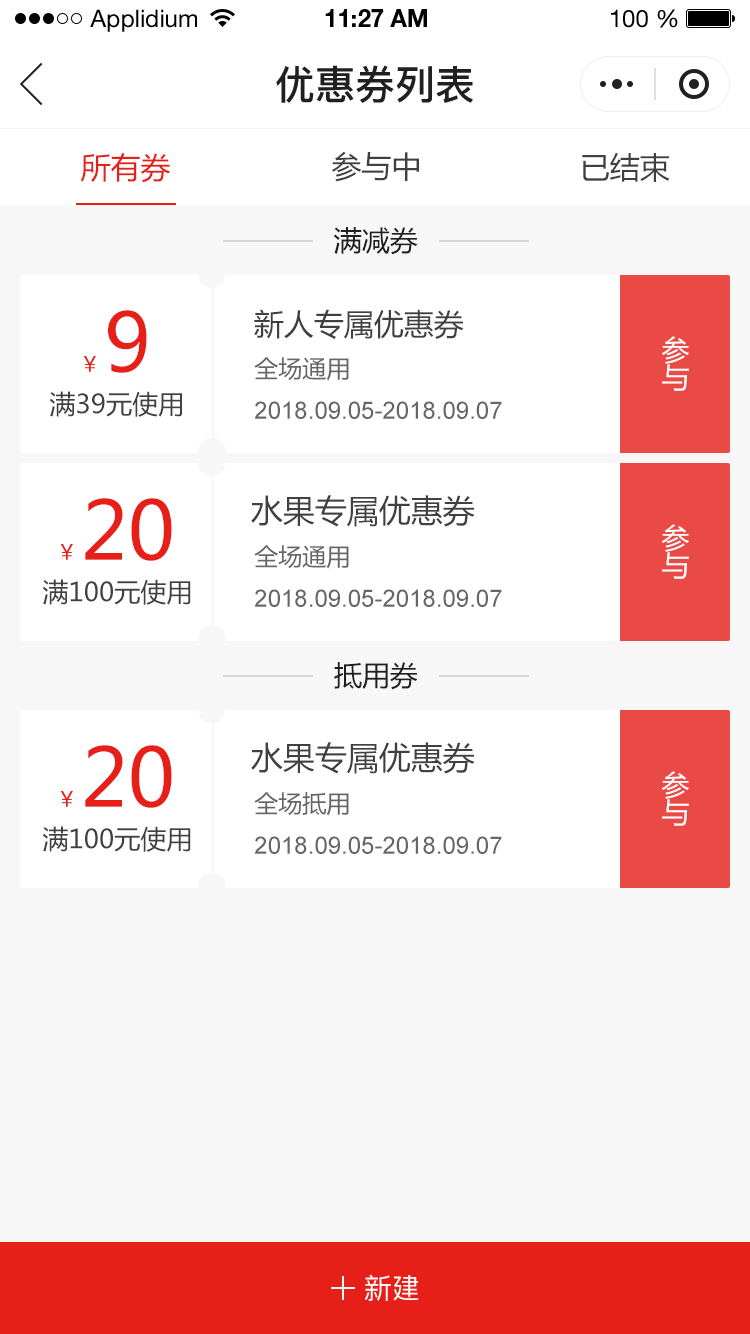
<style>
.page{position:relative;width:750px;height:1334px;background:#ffffff}
.page>*{position:absolute;margin:0}
.t1{font:24px "HelveticaNeueLTStd-Roman";color:#000000}
.t2{font:24px "HelveticaNeueLTStd-Bd";color:#000000}
.t3{font:40px "PingFang-SC-Bold";color:#202020;text-transform:uppercase}
.t4{font:30px "MicrosoftYaHei";color:#e61f18;text-transform:uppercase}
.t5{font:30px "MicrosoftYaHei";color:#404040;text-transform:uppercase}
.t6{font:28px "MicrosoftYaHei";color:#202020;text-transform:uppercase}
.t7{font:80px "MicrosoftYaHei";color:#e61f18;text-transform:uppercase}
.t8{font:28px "MicrosoftYaHei";color:#fffeff;text-transform:uppercase}
.t9{font:22px "PingFang-SC-Medium";color:#e61f18;text-transform:uppercase}
.t10{font:24px "MicrosoftYaHei";color:#666666;text-transform:uppercase}
.t11{font:26px "MicrosoftYaHei";color:#404040;text-transform:uppercase}
.t12{font:24px "ArialMT";color:#666666;text-transform:uppercase}
.t13{font:32px "MicrosoftYaHei";color:#404040;text-transform:uppercase}
.t14{font:28px "PingFang-SC-Medium";color:#ffffff;text-transform:uppercase}
</style>
<div class="page">
<p class="t1" style="left:90px;top:9px;width:107px;height:23px">Applidium</p>
<p class="t2" style="left:325px;top:9px;width:102px;height:18px">11:27 AM</p>
<p class="t1" style="left:611px;top:9px;width:67px;height:19px">100 %</p>
<p class="t3" style="left:276px;top:65px;width:197px;height:38px">优惠券列表</p>
<p class="t4" style="left:80px;top:153px;width:90px;height:30px">所有券</p>
<p class="t5" style="left:331px;top:151px;width:88px;height:31px">参与中</p>
<p class="t5" style="left:582px;top:152px;width:88px;height:30px">已结束</p>
<p class="t6" style="left:333px;top:227px;width:85px;height:28px">满减券</p>
<p class="t7" style="left:108px;top:310px;width:39px;height:63px">9</p>
<p class="t5" style="left:254px;top:309px;width:210px;height:30px">新人专属优惠券</p>
<p class="t8" style="left:661px;top:336px;width:28px;height:55px">参与</p>
<p class="t9" style="left:83px;top:356px;width:13px;height:16px">¥</p>
<p class="t10" style="left:254px;top:357px;width:95px;height:24px">全场通用</p>
<p class="t11" style="left:49px;top:391px;width:133px;height:26px">满39元使用</p>
<p class="t12" style="left:255px;top:401px;width:247px;height:18px">2018.09.05-2018.09.07</p>
<p class="t13" style="left:251px;top:495px;width:224px;height:32px">水果专属优惠券</p>
<p class="t7" style="left:85px;top:498px;width:87px;height:63px">20</p>
<p class="t8" style="left:661px;top:524px;width:28px;height:55px">参与</p>
<p class="t9" style="left:60px;top:544px;width:13px;height:16px">¥</p>
<p class="t10" style="left:254px;top:545px;width:95px;height:24px">全场通用</p>
<p class="t11" style="left:42px;top:579px;width:149px;height:26px">满100元使用</p>
<p class="t12" style="left:255px;top:589px;width:247px;height:18px">2018.09.05-2018.09.07</p>
<p class="t6" style="left:334px;top:662px;width:84px;height:28px">抵用券</p>
<p class="t7" style="left:85px;top:745px;width:87px;height:63px">20</p>
<p class="t13" style="left:251px;top:742px;width:224px;height:32px">水果专属优惠券</p>
<p class="t8" style="left:661px;top:771px;width:28px;height:55px">参与</p>
<p class="t9" style="left:60px;top:791px;width:13px;height:16px">¥</p>
<p class="t10" style="left:254px;top:792px;width:95px;height:24px">全场抵用</p>
<p class="t11" style="left:42px;top:826px;width:149px;height:26px">满100元使用</p>
<p class="t12" style="left:255px;top:836px;width:247px;height:18px">2018.09.05-2018.09.07</p>
<p class="t14" style="left:364px;top:1274px;width:55px;height:27px">新建</p>
</div>
